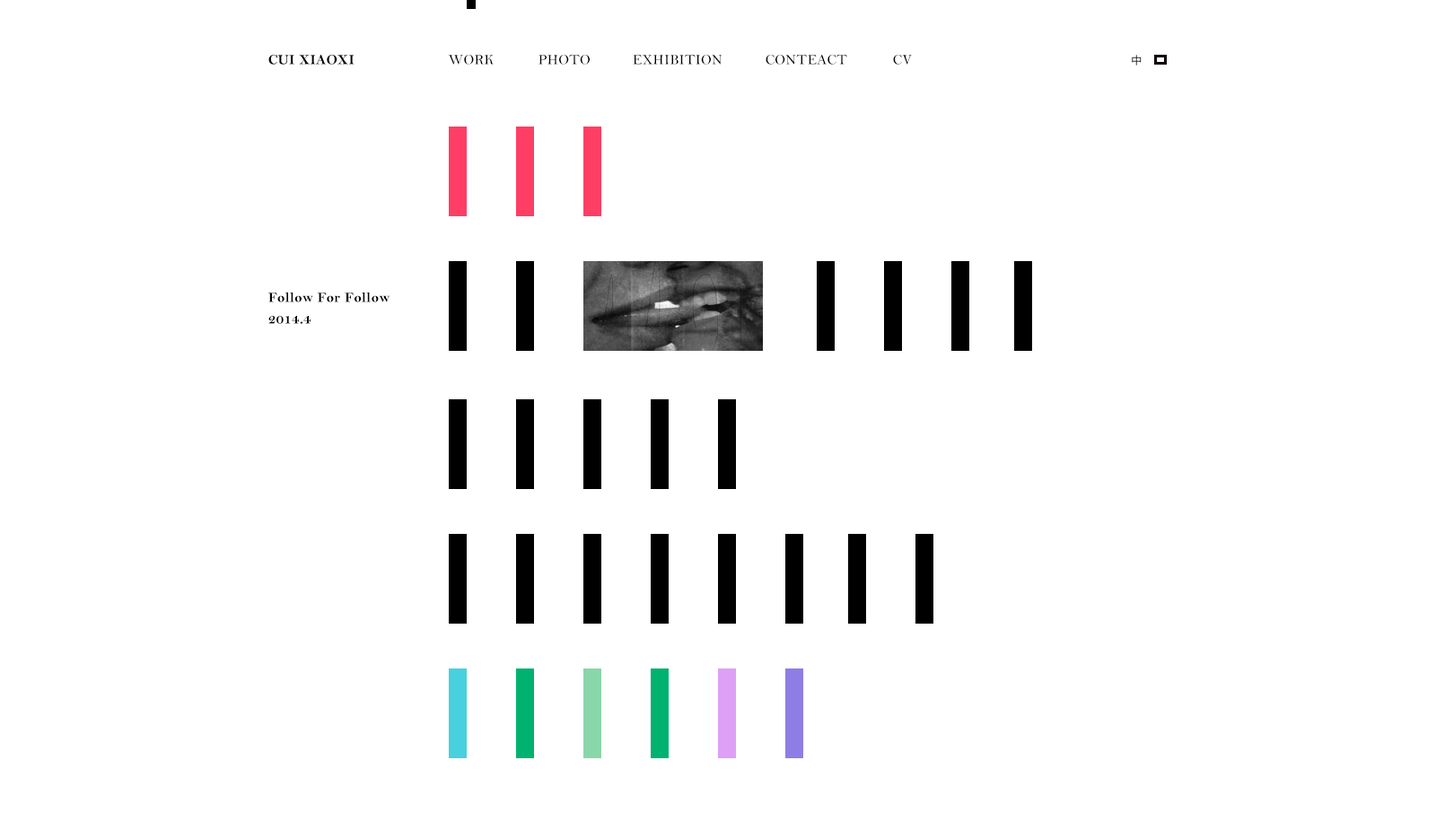
<style>
.page{position:relative;width:1436px;height:830px;background:#ffffff}
.page>*{position:absolute;margin:0}
.t1{font:14.4px "BellMTBold";letter-spacing:0.02em;color:#000000;text-transform:uppercase}
.t2{font:14.4px "BellMT";letter-spacing:0.02em;color:#000000;text-transform:uppercase}
.t3{font:10.8px "MicrosoftYaHei";letter-spacing:0.02em;text-transform:uppercase}
.t4{font:14.4px/21.5px "BellMTBold";letter-spacing:0.02em;color:#000000}
</style>
<div class="page">
<p class="t1" style="left:268px;top:55px;width:87px;height:10px">cui xiaoxi</p>
<p class="t2" style="left:448px;top:55px;width:46px;height:10px">work</p>
<p class="t2" style="left:539px;top:55px;width:51px;height:10px">photo</p>
<p class="t2" style="left:633px;top:55px;width:90px;height:10px">exhibition</p>
<p class="t2" style="left:766px;top:55px;width:81px;height:10px">conteact</p>
<p class="t2" style="left:893px;top:55px;width:19px;height:10px">cv</p>
<p class="t3" style="left:1132px;top:55px;width:10px;height:11px">中</p>
<p class="t4" style="left:268px;top:292px;width:122px;height:32px">Follow For Follow<br>2014.4</p>
</div>
